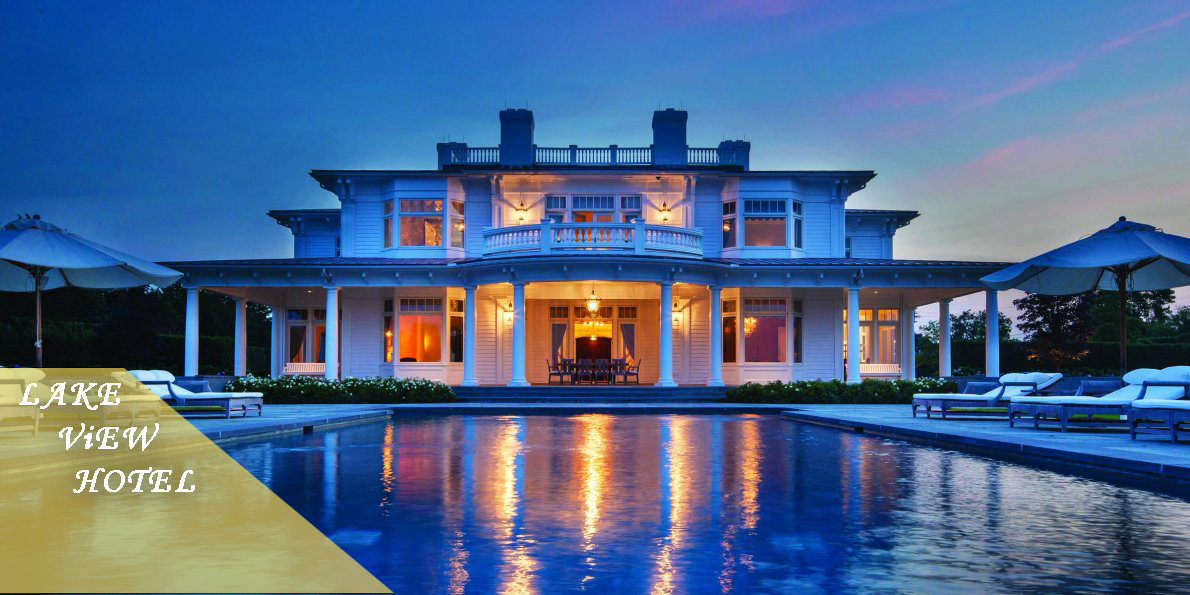
<style>
.page{position:relative;width:1190px;height:595px}
.page>*{position:absolute;margin:0}
.t1{font:36px "MonotypeCorsiva";letter-spacing:0.075em;color:#ffffff;text-transform:uppercase;font-weight:bold}
.t2{font:36px "MonotypeCorsiva";letter-spacing:0.075em;color:#ffffff;font-weight:bold}
</style>
<div class="page">
<p class="t1" style="left:19px;top:382px;width:176px;height:111px;text-align:center">lake<br>     v<span class="t2">i</span>ew<br>        hotel</p>
</div>
